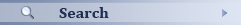
<style>
.page{position:relative;width:241px;height:25px}
.page>*{position:absolute;margin:0}
.t1{font:16px "Cambria-Bold";color:#202f4e}
</style>
<div class="page">
<p class="t1" style="left:59px;top:7px;width:50px;height:11px">Search</p>
</div>
